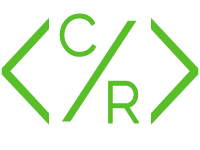
<style>
.page{position:relative;width:200px;height:150px;background:#ffffff}
.page>*{position:absolute;margin:0}
.t1{font:58.3px "Raleway";letter-spacing:0.025em;color:#58bf28}
.t2{font:200px "Raleway-Light";letter-spacing:0.025em;color:#58bf28;scale:0.56 1}
.t3{font:141.7px "Raleway-Light";letter-spacing:0.025em;color:#58bf28}
</style>
<div class="page">
<p class="t1" style="left:59px;top:14px;width:37px;height:43px">C</p>
<p class="t1" style="left:59px;top:13px;width:37px;height:43px">C</p>
<p class="t2" style="left:1px;top:18px;width:48px;height:107px;rotate:180deg">&gt;</p>
<p class="t3" style="left:62px;top:20px;width:75px;height:102px">/</p>
<p class="t2" style="left:151px;top:18px;width:48px;height:107px">&gt;</p>
<p class="t1" style="left:108px;top:81px;width:31px;height:43px">R</p>
<p class="t1" style="left:108px;top:80px;width:31px;height:43px">R</p>
</div>
